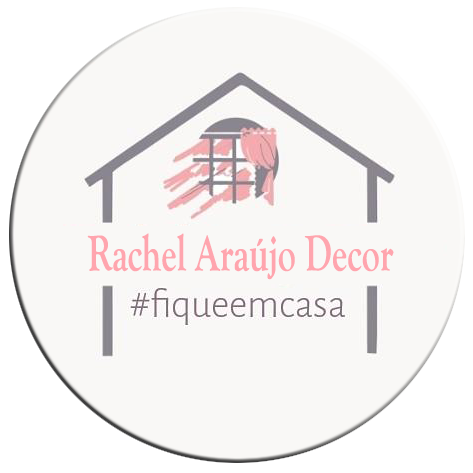
<style>
.page{position:relative;width:473px;height:473px;background:#f9f8f6}
.page>*{position:absolute;margin:0}
.t1{font:52px "GoudyOldStyleT-Bold";color:#ffa5ae;scale:0.69 1}
</style>
<div class="page">
<p class="t1" style="left:87px;top:233px;width:307px;height:47px">Rachel Araújo Decor</p>
</div>
